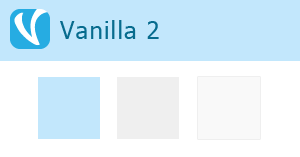
<style>
.page{position:relative;width:300px;height:157px;background:#c2e7fc}
.page>*{position:absolute;margin:0}
.t1{font:24px "Tahoma";letter-spacing:0.05em;color:#076c8e}
</style>
<div class="page">
<p class="t1" style="left:60px;top:20px;width:99px;height:19px">Vanilla 2</p>
</div>
